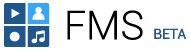
<style>
.page{position:relative;width:190px;height:50px;background:#ffffff}
.page>*{position:absolute;margin:0}
.t1{font:40px "Roboto-Light";color:#000000}
.t2{font:14px "Roboto-Regular";letter-spacing:-0.01em;color:#1f568e}
</style>
<div class="page">
<p class="t1" style="left:67px;top:10px;width:76px;height:30px">FMS</p>
<p class="t2" style="left:154px;top:28px;width:32px;height:11px">BETA</p>
</div>
